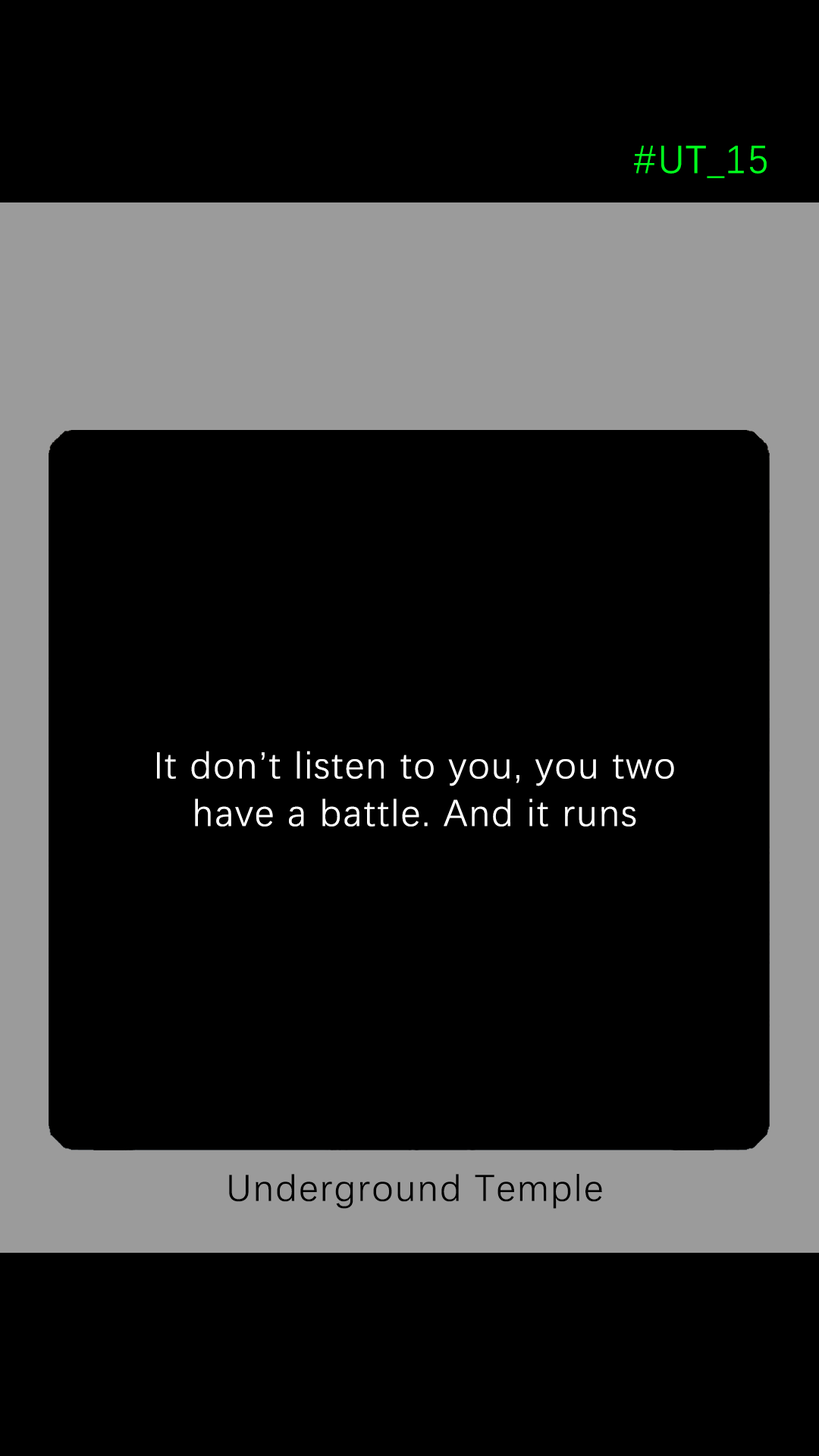
<style>
.page{position:relative;width:819px;height:1456px;background:#000000}
.page>*{position:absolute;margin:0}
.t1{font:39.2px "DengXian-Regular";letter-spacing:0.04em;color:#00ff1e}
.t2{font:37.9px/47.6px "DengXian-Regular";letter-spacing:0.04em;color:#ffffff}
.t3{font:37.9px "DengXian-Regular";letter-spacing:0.04em;color:#000000}
</style>
<div class="page">
<p class="t1" style="left:634px;top:146px;width:133px;height:32px">#UT_15</p>
<p class="t2" style="left:157px;top:751px;width:517px;height:76px;text-align:center">It don’t listen to you, you two<br>have a battle. And it runs</p>
<p class="t3" style="left:229px;top:1174px;width:373px;height:35px">Underground Temple</p>
</div>
